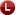
<style>
.page{position:relative;width:16px;height:15px}
.page>*{position:absolute;margin:0}
.t1{font:10px "ArialMT";color:#ffffff;font-weight:bold}
</style>
<div class="page">
<p class="t1" style="left:5px;top:3px;width:6px;height:8px">L</p>
</div>
